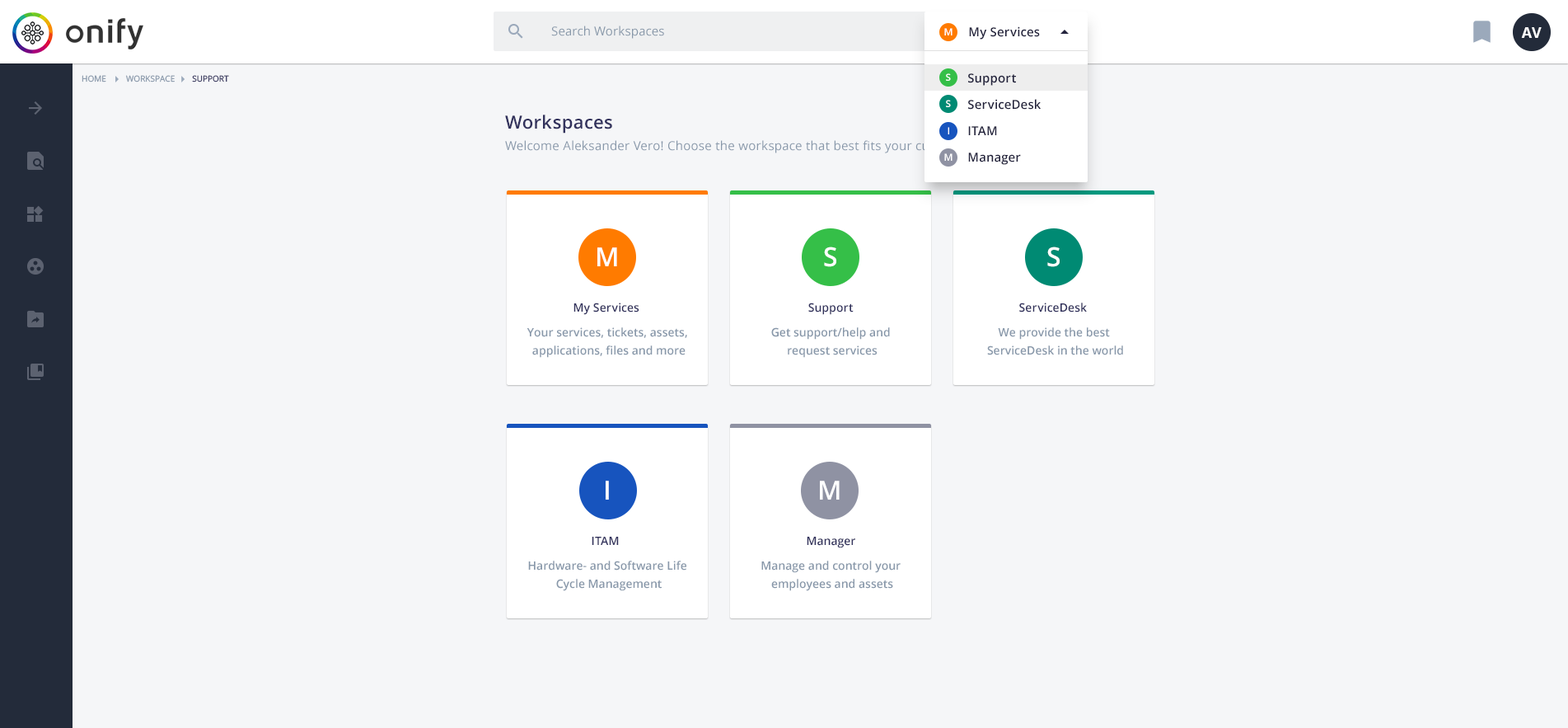
<style>
.page{position:relative;width:1568px;height:728px;background:#f5f6f8}
.page>*{position:absolute;margin:0}
.t1{font:12.4px "OpenSans";letter-spacing:0.01em;color:#8898aa}
.t2{font:9.9px "OpenSans-Semibold";letter-spacing:0.01em;color:#ffffff}
.t3{font:12.4px "OpenSans-Semibold";letter-spacing:0.01em}
.t4{font:12.4px "OpenSans-Semibold";letter-spacing:0.01em;color:#23233d}
.t5{font:14.8px "OpenSans-Bold";color:#ffffff;text-transform:uppercase}
.t6{font:8.2px "OpenSans";color:#8898aa;text-transform:uppercase}
.t7{font:8.2px "OpenSans";color:#32325d;text-transform:uppercase}
.t8{font:18.1px "OpenSans-Semibold";letter-spacing:0.02em;color:#32325d}
.t9{font:12.4px "OpenSans";letter-spacing:0.02em;color:#8898aa}
.t10{font:26.4px "OpenSans-Semibold";letter-spacing:0.005em;color:#ffffff}
.t11{font:11.5px "OpenSans-Semibold";letter-spacing:0.005em;color:#32325d}
.t12{font:11.5px/18.1px "OpenSans-Semibold";color:#8898aa}
</style>
<div class="page">
<p class="t1" style="left:551px;top:26px;width:113px;height:13px">Search Workspaces</p>
<p class="t2" style="left:944px;top:28px;width:9px;height:7px">M</p>
<p class="t2" style="left:944px;top:28px;width:9px;height:7px">M</p>
<p class="t3" style="left:969px;top:26px;width:70px;height:14px">My Services</p>
<p class="t4" style="left:969px;top:26px;width:71px;height:14px">My Services</p>
<p class="t5" style="left:1521px;top:27px;width:21px;height:11px">AV</p>
<p class="t6" style="left:82px;top:75px;width:24px;height:7px">Home</p>
<p class="t6" style="left:126px;top:75px;width:49px;height:7px">Workspace</p>
<p class="t7" style="left:192px;top:75px;width:37px;height:7px">Support</p>
<p class="t2" style="left:946px;top:73px;width:5px;height:8px">S</p>
<p class="t4" style="left:968px;top:73px;width:48px;height:13px">Support</p>
<p class="t2" style="left:946px;top:100px;width:5px;height:7px">S</p>
<p class="t4" style="left:968px;top:99px;width:73px;height:11px">ServiceDesk</p>
<p class="t8" style="left:505px;top:115px;width:107px;height:18px">Workspaces</p>
<p class="t2" style="left:948px;top:127px;width:1px;height:7px">I</p>
<p class="t4" style="left:968px;top:126px;width:29px;height:9px">ITAM</p>
<p class="t9" style="left:505px;top:140px;width:497px;height:13px">Welcome Aleksander Vero! Choose the workspace that best fits your current needs.</p>
<p class="t2" style="left:944px;top:153px;width:9px;height:8px">M</p>
<p class="t4" style="left:968px;top:152px;width:53px;height:13px">Manager</p>
<p class="t10" style="left:597px;top:247px;width:20px;height:19px">M</p>
<p class="t10" style="left:824px;top:246px;width:12px;height:21px">S</p>
<p class="t10" style="left:1047px;top:246px;width:13px;height:21px">S</p>
<p class="t11" style="left:573px;top:302px;width:66px;height:13px">My Services</p>
<p class="t11" style="left:808px;top:302px;width:46px;height:13px">Support</p>
<p class="t11" style="left:1019px;top:302px;width:68px;height:10px">ServiceDesk</p>
<p class="t12" style="left:527px;top:327px;width:160px;height:31px;text-align:center">Your services, tickets, assets, <br>applications, files and more</p>
<p class="t12" style="left:771px;top:327px;width:119px;height:31px;text-align:center">Get support/help and <br>request services</p>
<p class="t12" style="left:987px;top:327px;width:136px;height:28px;text-align:center">We provide the best <br>ServiceDesk in the world</p>
<p class="t10" style="left:606px;top:480px;width:3px;height:19px">I</p>
<p class="t10" style="left:820px;top:480px;width:20px;height:19px">M</p>
<p class="t11" style="left:592px;top:536px;width:27px;height:9px">ITAM</p>
<p class="t11" style="left:807px;top:536px;width:48px;height:12px">Manager</p>
<p class="t12" style="left:528px;top:560px;width:158px;height:31px;text-align:center">Hardware- and Software Life <br>Cycle Management</p>
<p class="t12" style="left:761px;top:560px;width:140px;height:31px;text-align:center">Manage and control your <br>employees and assets</p>
</div>
